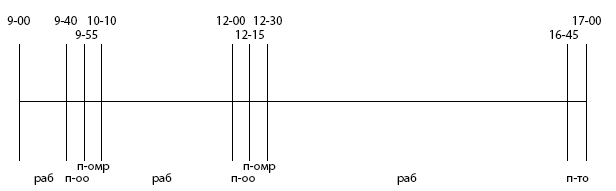
<style>
.page{position:relative;width:616px;height:191px;background:#ffffff}
.page>*{position:absolute;margin:0}
.t1{font:12.5px "MyriadPro-Regular";color:#000000}
</style>
<div class="page">
<p class="t1" style="left:7px;top:16px;width:23px;height:9px">9-00</p>
<p class="t1" style="left:54px;top:16px;width:23px;height:9px">9-40</p>
<p class="t1" style="left:88px;top:16px;width:28px;height:9px">10-10</p>
<p class="t1" style="left:217px;top:16px;width:28px;height:9px">12-00</p>
<p class="t1" style="left:254px;top:16px;width:28px;height:9px">12-30</p>
<p class="t1" style="left:573px;top:16px;width:28px;height:9px">17-00</p>
<p class="t1" style="left:75px;top:30px;width:23px;height:9px">9-55</p>
<p class="t1" style="left:236px;top:30px;width:28px;height:9px">12-15</p>
<p class="t1" style="left:550px;top:30px;width:28px;height:9px">16-45</p>
<p class="t1" style="left:34px;top:173px;width:20px;height:12px">раб</p>
<p class="t1" style="left:77px;top:164px;width:33px;height:9px">п-омр</p>
<p class="t1" style="left:152px;top:173px;width:20px;height:12px">раб</p>
<p class="t1" style="left:243px;top:164px;width:33px;height:9px">п-омр</p>
<p class="t1" style="left:397px;top:173px;width:20px;height:12px">раб</p>
<p class="t1" style="left:65px;top:176px;width:24px;height:6px">п-оо</p>
<p class="t1" style="left:231px;top:176px;width:24px;height:6px">п-оо</p>
<p class="t1" style="left:567px;top:176px;width:22px;height:6px">п-то</p>
</div>
